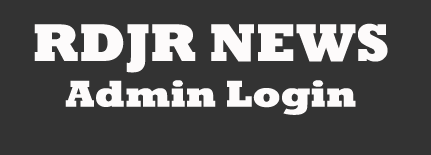
<style>
.page{position:relative;width:431px;height:155px;background:#333333}
.page>*{position:absolute;margin:0}
.t1{font:38px "Rockwell-ExtraBold";color:#fdfbfb}
.t2{font:54px "Rockwell-ExtraBold";color:#fdfbfb}
</style>
<div class="page">
<p class="t1" style="left:34px;top:23px;width:354px;height:92px;text-align:center"><span class="t2">RDJR NEWS<br></span>Admin Login</p>
</div>
